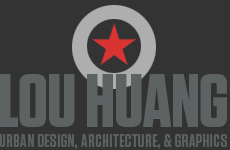
<style>
.page{position:relative;width:230px;height:150px;background:#333333}
.page>*{position:absolute;margin:0}
.t1{font:75px "Tungsten-Bold";letter-spacing:-0.01em;color:#5d6262}
.t2{font:18px "Tungsten-Semibold";letter-spacing:0.023em;color:#5d6262;text-transform:uppercase}
</style>
<div class="page">
<p class="t1" style="left:0px;top:74px;width:227px;height:53px">LOU HUANG</p>
<p class="t2" style="left:0px;top:134px;width:227px;height:15px">urban design, architecture, &amp; graphics</p>
</div>
